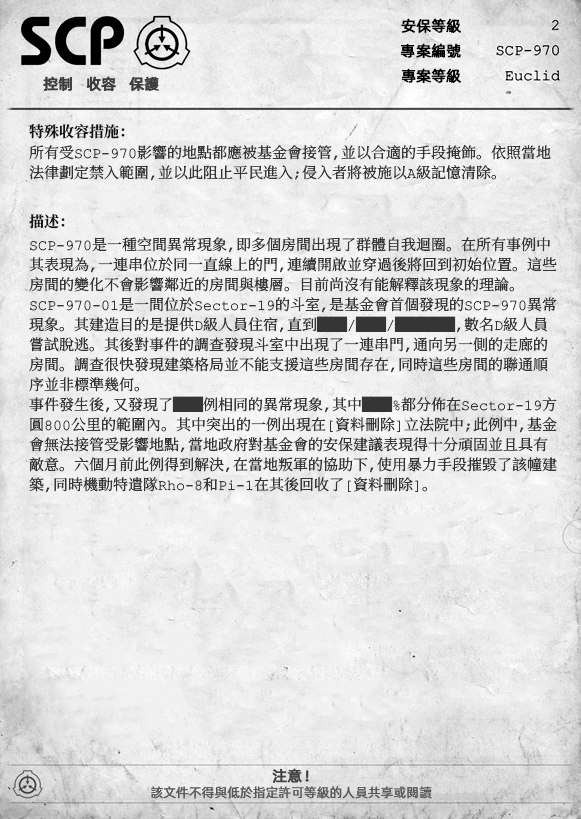
<style>
.page{position:relative;width:581px;height:819px}
.page>*{position:absolute;margin:0}
.t1{font:15px "AlibabaPuHuiTiR";color:#000000;font-weight:bold}
.t2{font:15px "AlibabaPuHuiTiR";color:#3d3d3d;font-weight:bold}
.t3{font:15px "ContainmentBreach-Bold";color:#121212}
.t4{font:15px/20px "ContainmentBreach-Regular";color:#353535}
.t5{font:15px "AlibabaPuHuiTiR";color:#414141;font-weight:bold}
.t6{font:13px "AlibabaPuHuiTiR";color:#575757}
</style>
<div class="page">
<p class="t1" style="left:401px;top:18px;width:60px;height:15px">安保等級</p>
<p class="t1" style="left:400px;top:43px;width:61px;height:15px">專案編號</p>
<p class="t2" style="left:43px;top:76px;width:115px;height:15px">控制   收容   保护</p>
<p class="t2" style="left:43px;top:76px;width:116px;height:15px">控制   收容   保護</p>
<p class="t1" style="left:401px;top:68px;width:60px;height:15px">專案等級</p>
<p class="t3" style="left:29px;top:124px;width:96px;height:15px">特殊收容措施：</p>
<p class="t4" style="left:29px;top:145px;width:522px;height:36px">所有受SCP-970影響的地點都應被基金會接管，並以合適的手段掩飾。依照當地<br>法律劃定禁入範圍，並以此阻止平民進入；侵入者將被施以A級記憶清除。</p>
<p class="t3" style="left:29px;top:214px;width:36px;height:15px">描述：</p>
<p class="t4" style="left:29px;top:237px;width:528px;height:256px">SCP-970是一種空間異常現象，即多個房間出現了群體自我迴圈。在所有事例中<br>其表現為，一連串位於同一直線上的門，連續開啟並穿過後將回到初始位置。這些<br>房間的變化不會影響鄰近的房間與樓層。目前尚沒有能解釋該現象的理論。<br>SCP-970-01是一間位於Sector-19的斗室，是基金會首個發現的SCP-970異常<br>現象。其建造目的是提供D級人員住宿，直到██/██/████，數名D級人員<br>嘗試脫逃。其後對事件的調查發現斗室中出現了一連串門，通向另一側的走廊的<br>房間。調查很快發現建築格局並不能支援這些房間存在，同時這些房間的聯通順<br>序並非標準幾何。<br>事件發生後，又發現了██例相同的異常現象，其中██%都分佈在Sector-19方<br>圓800公里的範圍內。其中突出的一例出現在[資料刪除]立法院中；此例中，基金<br>會無法接管受影響地點，當地政府對基金會的安保建議表現得十分頑固並且具有<br>敵意。六個月前此例得到解決，在當地叛軍的協助下，使用暴力手段摧毀了該幢建<br>築，同時機動特遣隊Rho-8和Pi-1在其後回收了[資料刪除]。</p>
<p class="t5" style="left:272px;top:768px;width:37px;height:15px">注意！</p>
<p class="t6" style="left:151px;top:786px;width:281px;height:13px">該文件不得與低於指定許可等級的人員共享或閱讀</p>
</div>
